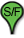
<style>
.page{position:relative;width:24px;height:38px;background:#ffffff}
.page>*{position:absolute;margin:0}
.t1{font:12px "ArialMT";letter-spacing:-0.05em;color:#000000}
</style>
<div class="page">
<p class="t1" style="left:4px;top:7px;width:17px;height:10px">S/F</p>
</div>
